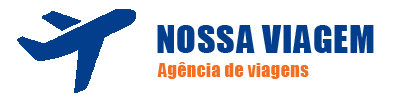
<style>
.page{position:relative;width:400px;height:100px;background:#ffffff}
.page>*{position:absolute;margin:0}
.t1{font:36px "Impact";letter-spacing:0.025em;color:#033e8c}
.t2{font:18px "Impact";letter-spacing:0.025em;color:#f26e22}
</style>
<div class="page">
<p class="t1" style="left:157px;top:25px;width:217px;height:28px">NOSSA VIAGEM</p>
<p class="t2" style="left:157px;top:62px;width:152px;height:17px">Agência de viagens</p>
</div>
